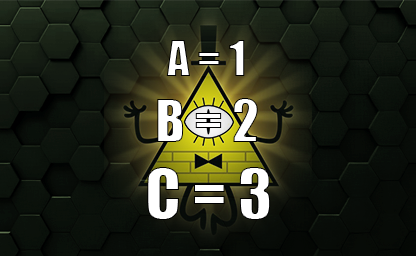
<style>
.page{position:relative;width:416px;height:256px}
.page>*{position:absolute;margin:0}
.t1{font:45px "Impact";color:#ffffff}
.t2{font:54px "Impact";color:#ffffff}
.t3{font:65px "Impact";color:#ffffff}
</style>
<div class="page">
<p class="t1" style="left:166px;top:40px;width:79px;height:36px">A = 1</p>
<p class="t2" style="left:157px;top:98px;width:101px;height:44px">B = 2</p>
<p class="t3" style="left:147px;top:167px;width:124px;height:53px">C = 3</p>
</div>
